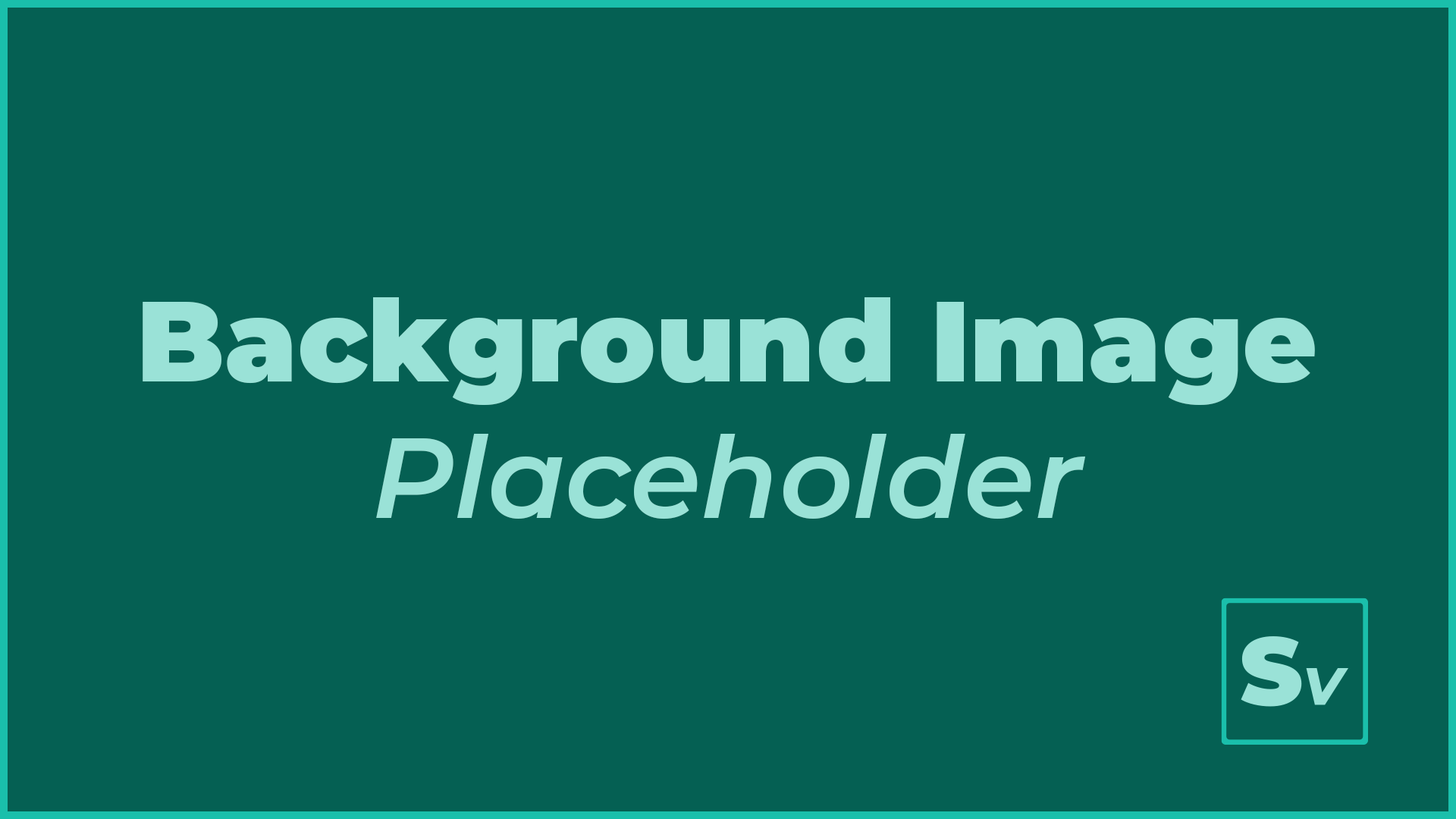
<style>
.page{position:relative;width:1456px;height:819px;background:#056053}
.page>*{position:absolute;margin:0}
.t1{font:113.7px "Montserrat-Black";color:#9ae2d7}
.t2{font:113.7px "Montserrat-SemiBoldItalic";color:#9ae2d7}
</style>
<div class="page">
<p class="t1" style="left:143px;top:297px;width:1172px;height:222px;text-align:center">Background Image<br><span class="t2">Placeholder</span></p>
</div>
